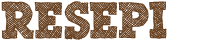
<style>
.page{position:relative;width:211px;height:40px;background:#ffffff}
.page>*{position:absolute;margin:0}
.t1{font:50px "ScribbleBoxDEMO";color:#684121}
</style>
<div class="page">
<p class="t1" style="left:1px;top:1px;width:166px;height:39px">Resepi</p>
</div>
